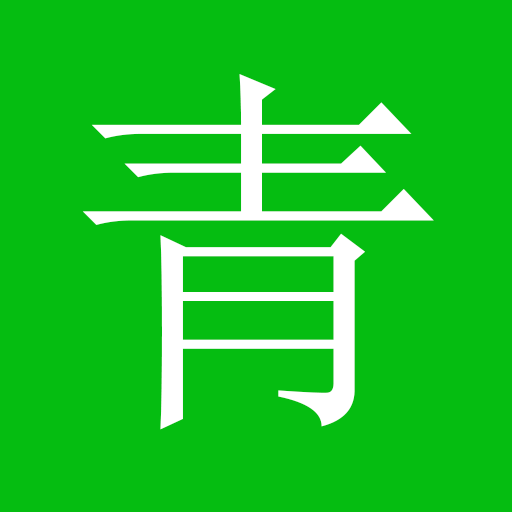
<style>
.page{position:relative;width:512px;height:512px;background:#05bd11}
.page>*{position:absolute;margin:0}
.t1{font:382px "SimSun";color:#ffffff}
</style>
<div class="page">
<p class="t1" style="left:82px;top:74px;width:352px;height:356px">青</p>
</div>
